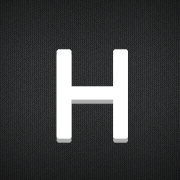
<style>
.page{position:relative;width:180px;height:180px}
.page>*{position:absolute;margin:0}
.t1{font:120px "HelveticaNeue";color:#ffffff;font-weight:bold}
</style>
<div class="page">
<p class="t1" style="left:56px;top:53px;width:72px;height:90px">H</p>
<p class="t1" style="left:56px;top:49px;width:72px;height:90px">H</p>
</div>
